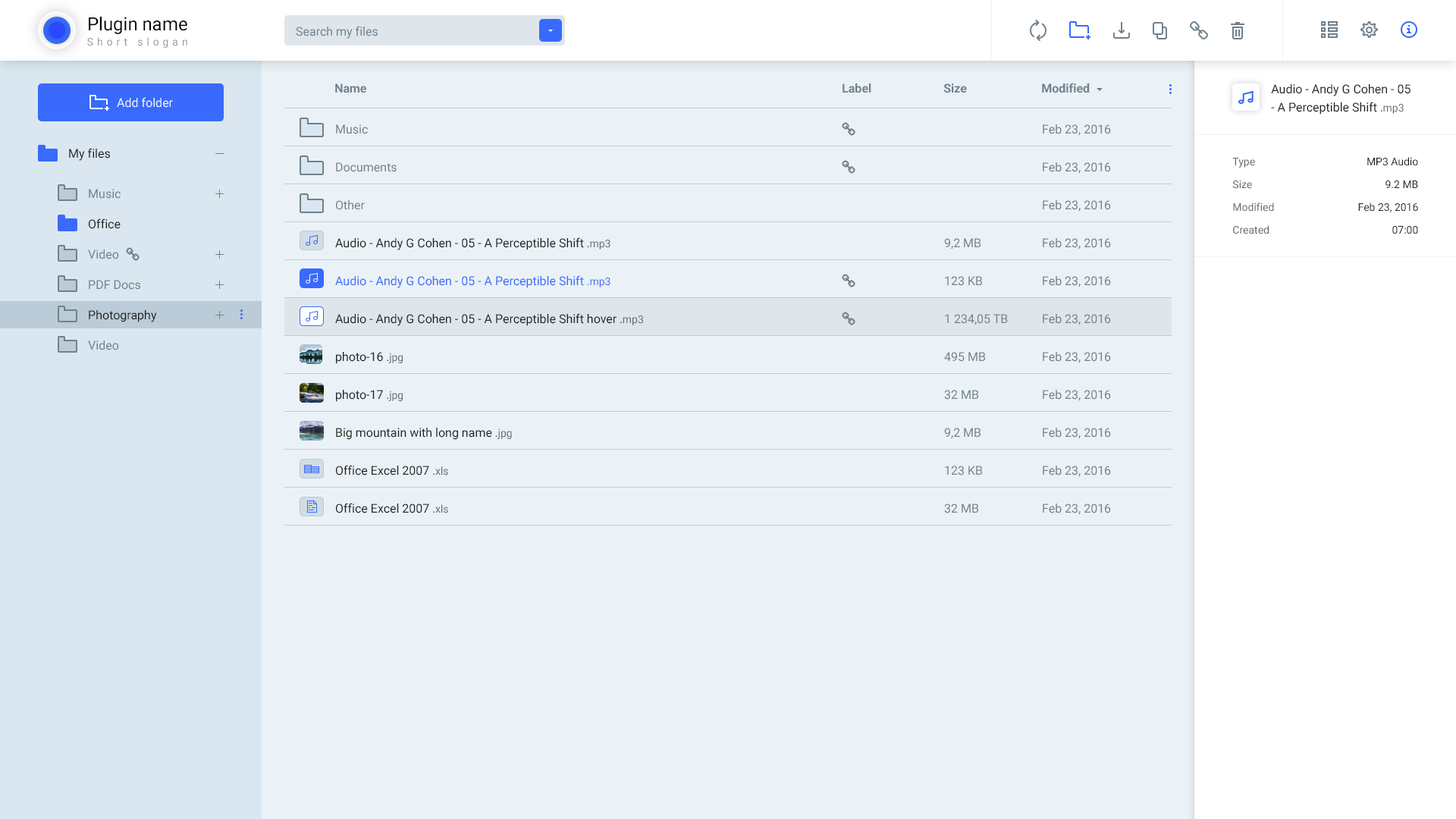
<style>
.page{position:relative;width:1456px;height:819px;background:#ebf2f7}
.page>*{position:absolute;margin:0}
.t1{font:18.2px "Roboto-Regular";color:#000000}
.t2{font:12.1px "Roboto-Regular";color:#70818c}
.t3{font:10.6px "Roboto-Regular";letter-spacing:0.35em;color:#999999}
.t4{font:12.1px "Roboto-Bold";color:#70818c}
.t5{font:12.1px/18.2px "Roboto-Regular";color:#222222}
.t6{font:10.6px/18.2px "Roboto-Regular";color:#222222}
.t7{font:10.6px/18.2px "Roboto-Regular";color:#666666}
.t8{font:12.1px "Roboto-Regular";color:#ebf2f7}
.t9{font:12.1px/37.9px "Roboto-Regular";color:#222222}
.t10{font:12.1px/37.9px "Roboto-Regular";color:#70818c}
.t11{font:10.6px/37.9px "Roboto-Regular";color:#222222}
.t12{font:10.6px/37.9px "Roboto-Regular";color:#666666}
.t13{font:12.1px/37.9px "Roboto-Regular";color:#396afc}
.t14{font:10.6px/37.9px "Roboto-Regular";color:#396afc}
.t15{font:12.1px "Roboto-Regular";color:#222222}
.t16{font:10.6px/22.7px "Roboto-Regular";color:#666666}
.t17{font:10.6px/22.7px "Roboto-Regular";color:#222222}
.t18{font:12.1px/30.3px "Roboto-Regular";color:#70818c}
.t19{font:12.1px/30.3px "Roboto-Regular";color:#222222}
</style>
<div class="page">
<p class="t1" style="left:89px;top:17px;width:98px;height:17px">Plugin name</p>
<p class="t2" style="left:296px;top:26px;width:82px;height:13px">Search my files</p>
<p class="t3" style="left:87px;top:37px;width:100px;height:11px">Short slogan</p>
<p class="t4" style="left:335px;top:83px;width:31px;height:10px">Name</p>
<p class="t4" style="left:842px;top:83px;width:29px;height:10px">Label</p>
<p class="t4" style="left:943px;top:83px;width:24px;height:10px">Size</p>
<p class="t4" style="left:1042px;top:83px;width:48px;height:10px">Modified</p>
<p class="t5" style="left:1271px;top:84px;width:139px;height:31px">Audio - Andy G Cohen - 05<br>- A Perceptible Shift <span class="t6">.</span><span class="t7">mp3</span></p>
<p class="t8" style="left:117px;top:97px;width:56px;height:11px">Add folder</p>
<p class="t9" style="left:335px;top:124px;width:308px;height:389px"><span class="t10">Music<br>Documents<br>Other<br></span>Audio - Andy G Cohen - 05 - A Perceptible Shift <span class="t11">.</span><span class="t12">mp3<br></span><span class="t13">Audio - Andy G Cohen - 05 - A Perceptible Shift </span><span class="t14">.mp3<br></span>Audio - Andy G Cohen - 05 - A Perceptible Shift hover <span class="t11">.</span><span class="t12">mp3<br></span>photo-16 <span class="t11">.</span><span class="t12">jpg<br></span>photo-17 <span class="t11">.</span><span class="t12">jpg<br></span>Big mountain with long name <span class="t11">.</span><span class="t12">jpg<br></span>Office Excel 2007 <span class="t11">.</span><span class="t12">xls<br></span>Office Excel 2007 <span class="t11">.</span><span class="t12">xls</span></p>
<p class="t10" style="left:1043px;top:124px;width:68px;height:391px">Feb 23, 2016<br>Feb 23, 2016<br>Feb 23, 2016<br>Feb 23, 2016<br>Feb 23, 2016<br>Feb 23, 2016<br>Feb 23, 2016<br>Feb 23, 2016<br>Feb 23, 2016<br>Feb 23, 2016<br>Feb 23, 2016</p>
<p class="t15" style="left:69px;top:148px;width:41px;height:13px">My files</p>
<p class="t16" style="left:1232px;top:158px;width:42px;height:76px">Type <br>Size<br>Modified<br>Created</p>
<p class="t17" style="left:1358px;top:157px;width:60px;height:77px;text-align:right">MP3 Audio<br>9.2 MB<br>Feb 23, 2016<br>07:00</p>
<p class="t18" style="left:88px;top:189px;width:69px;height:161px">Music<br><span class="t19">Office<br></span>Video<br>PDF Docs<br><span class="t19">Photography<br></span>Video</p>
<p class="t10" style="left:944px;top:238px;width:64px;height:275px">9,2 MB<br>123 KB<br>1 234,05 TB<br>495 MB<br>32 MB<br>9,2 MB<br>123 KB<br>32 MB</p>
</div>
